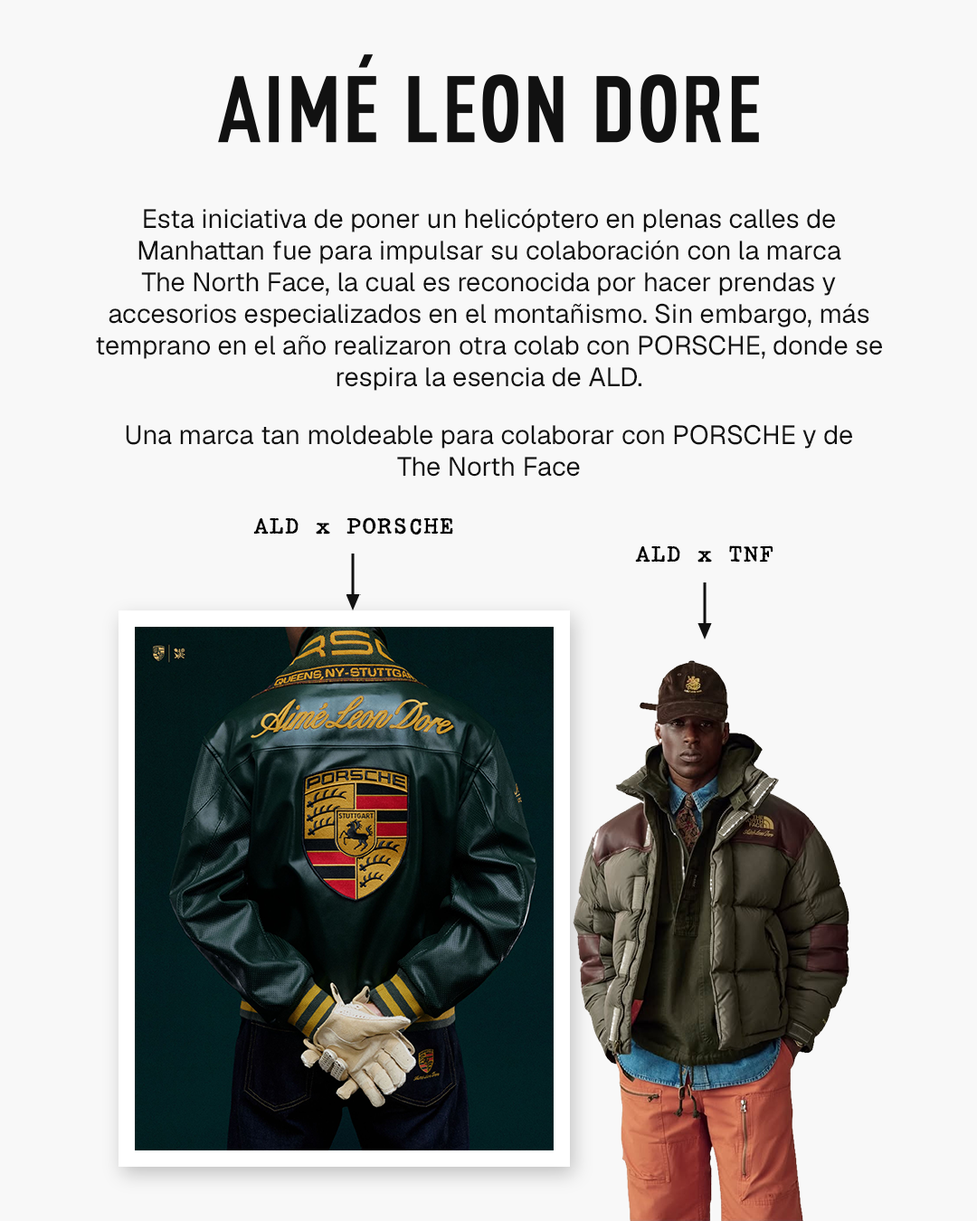
<style>
.page{position:relative;width:977px;height:1221px;background:#f8f8f8}
.page>*{position:absolute;margin:0}
.t1{font:26.4px "Geist-Regular";color:#111111}
.t2{font:26.4px "SecretServiceTypewriterRR-Regular";color:#000000}
</style>
<div class="page">
<p class="t1" style="left:96px;top:208px;width:786px;height:183px;text-align:center">Esta iniciativa de poner un helicóptero en plenas calles de Manhattan fue para impulsar su colaboración con la marca The North Face, la cual es reconocida por hacer prendas y accesorios especializados en el montañismo. Sin embargo, más temprano en el año realizaron otra colab con PORSCHE, donde se respira la esencia de ALD.</p>
<p class="t1" style="left:126px;top:424px;width:726px;height:53px;text-align:center">Una marca tan moldeable para colaborar con PORSCHE y de <br>The North Face</p>
<p class="t2" style="left:253px;top:517px;width:200px;height:17px">ALD x PORSCHE</p>
<p class="t2" style="left:635px;top:545px;width:138px;height:18px">ALD x TNF</p>
</div>
